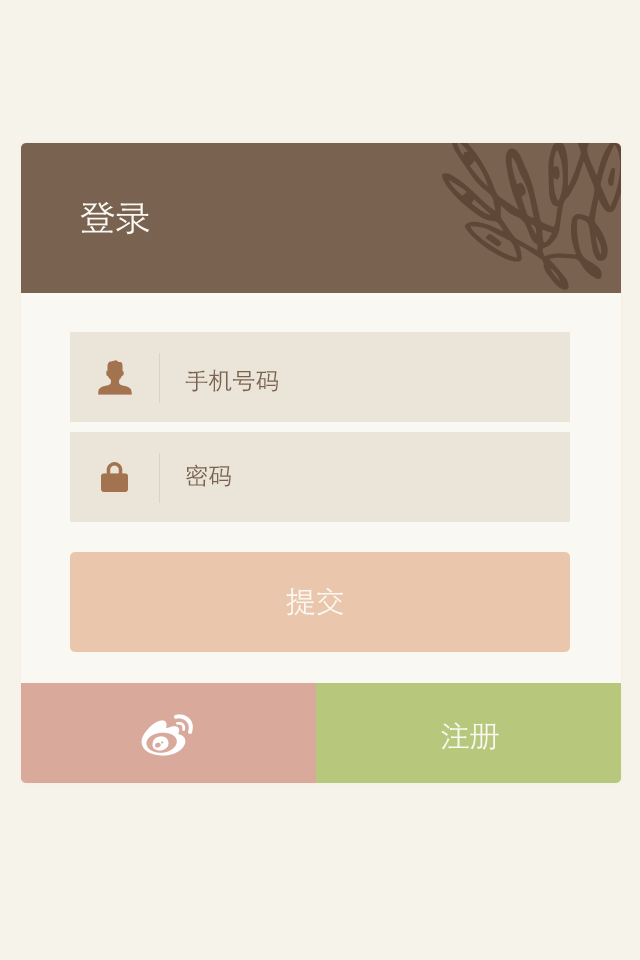
<style>
.page{position:relative;width:640px;height:960px;background:#f6f3ea}
.page>*{position:absolute;margin:0}
.t1{font:36px "STHeitiSC-Light";letter-spacing:-0.02em;color:#faf8f3}
.t2{font:24px "STHeitiSC-Light";letter-spacing:-0.02em;color:#7a6251}
.t3{font:30px "STHeitiSC-Light";letter-spacing:-0.02em;color:#faf8f3}
</style>
<div class="page">
<p class="t1" style="left:80px;top:201px;width:70px;height:34px">登录</p>
<p class="t2" style="left:185px;top:369px;width:93px;height:23px">手机号码</p>
<p class="t2" style="left:186px;top:464px;width:45px;height:23px">密码</p>
<p class="t3" style="left:286px;top:587px;width:57px;height:29px">提交</p>
<p class="t3" style="left:441px;top:722px;width:58px;height:28px">注册</p>
</div>
